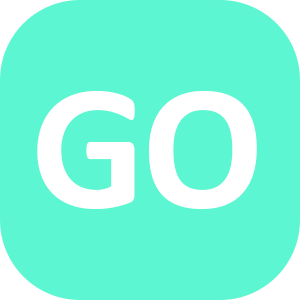
<style>
.page{position:relative;width:300px;height:300px;background:#5cf7d2}
.page>*{position:absolute;margin:0}
.t1{font:180.4px "Calibri-Bold";letter-spacing:-0.02em;color:#ffffff}
</style>
<div class="page">
<p class="t1" style="left:37px;top:91px;width:220px;height:118px">GO</p>
</div>
